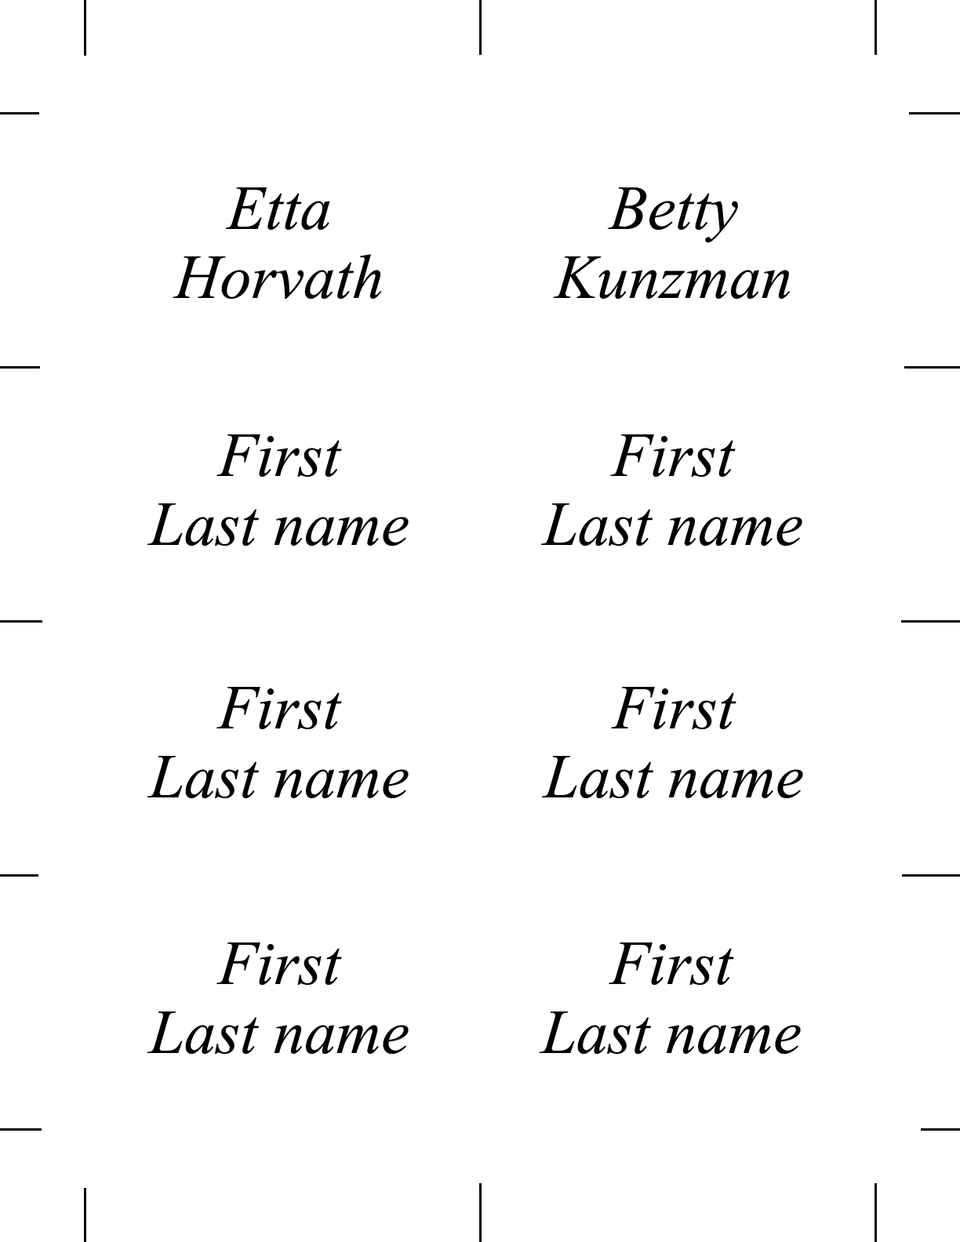
<style>
.page{position:relative;width:960px;height:1242px;background:#ffffff}
.page>*{position:absolute;margin:0}
.t1{font:62.7px/69px "TimesNewRomanPS-ItalicMT";color:#000000}
</style>
<div class="page">
<p class="t1" style="left:173px;top:187px;width:209px;height:112px;text-align:center">Etta<br>Horvath</p>
<p class="t1" style="left:553px;top:187px;width:237px;height:112px;text-align:center">Betty<br>Kunzman</p>
<p class="t1" style="left:147px;top:434px;width:262px;height:112px;text-align:center">First<br>Last name</p>
<p class="t1" style="left:540px;top:434px;width:262px;height:112px;text-align:center">First<br>Last name</p>
<p class="t1" style="left:147px;top:687px;width:262px;height:111px;text-align:center">First<br>Last name</p>
<p class="t1" style="left:541px;top:687px;width:262px;height:111px;text-align:center">First<br>Last name</p>
<p class="t1" style="left:147px;top:943px;width:262px;height:111px;text-align:center">First<br>Last name</p>
<p class="t1" style="left:539px;top:943px;width:262px;height:111px;text-align:center">First<br>Last name</p>
</div>
